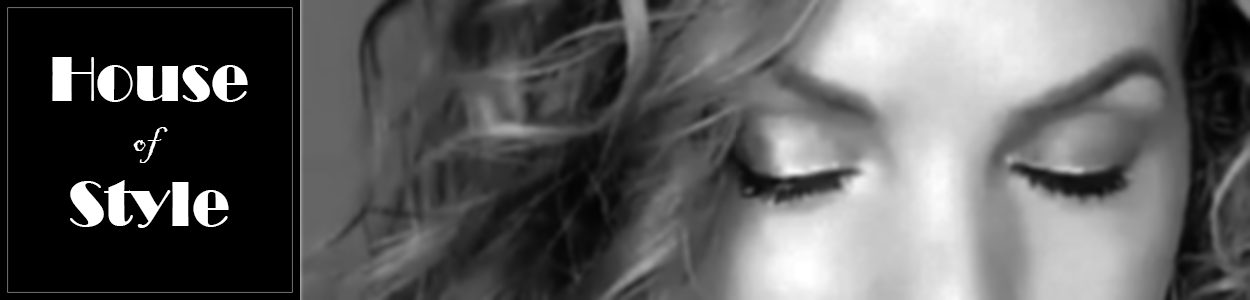
<style>
.page{position:relative;width:1250px;height:300px;background:#000000}
.page>*{position:absolute;margin:0}
.t1{font:65.9px/58.6px "Broadway";color:#ffffff;scale:0.95 1}
.t2{font:65.9px/66.7px "Broadway";color:#ffffff;scale:0.95 1}
.t3{font:41.7px "BlackadderITC-Regular";color:#ffffff;scale:0.95 1}
</style>
<div class="page">
<p class="t1" style="left:52px;top:57px;width:196px;height:171px;text-align:center">House<br><br><span class="t2">Style</span></p>
<p class="t3" style="left:133px;top:127px;width:35px;height:36px">of</p>
</div>
